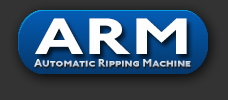
<style>
.page{position:relative;width:228px;height:100px;background:#333333}
.page>*{position:absolute;margin:0}
.t1{font:52.9px "JohnstonITC-BoldSC";color:#fffefe;scale:1.39 1}
.t2{font:10.9px "JohnstonITC-BoldSC";color:#c9d6e1;scale:1.09 1}
</style>
<div class="page">
<p class="t1" style="left:35px;top:18px;width:152px;height:36px">ARM</p>
<p class="t2" style="left:34px;top:59px;width:157px;height:8px">Automatic Ripping Machine</p>
</div>
